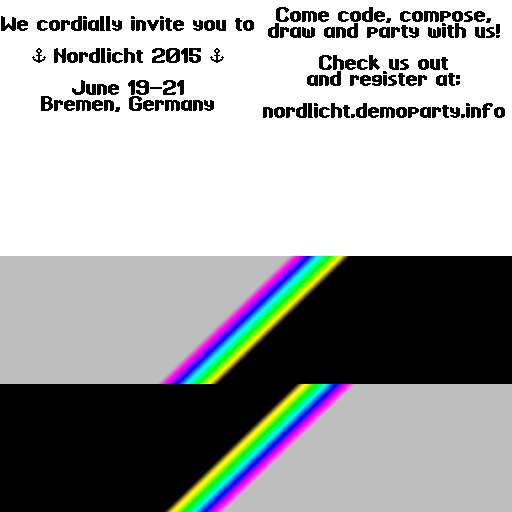
<style>
.page{position:relative;width:512px;height:512px;background:#ffffff}
.page>*{position:absolute;margin:0}
.t1{font:12px/16px "Forever";color:#000000}
</style>
<div class="page">
<p class="t1" style="left:1px;top:16px;width:253px;height:96px;text-align:center">We cordially invite you to<br><br>$ Nordlicht 2015 $<br><br>June 19-21<br>Bremen, Germany</p>
<p class="t1" style="left:263px;top:7px;width:242px;height:111px;text-align:center">Come code, compose,<br>draw and party with us!<br><br>Check us out<br>and register at:<br><br>nordlicht.demoparty.info</p>
</div>
